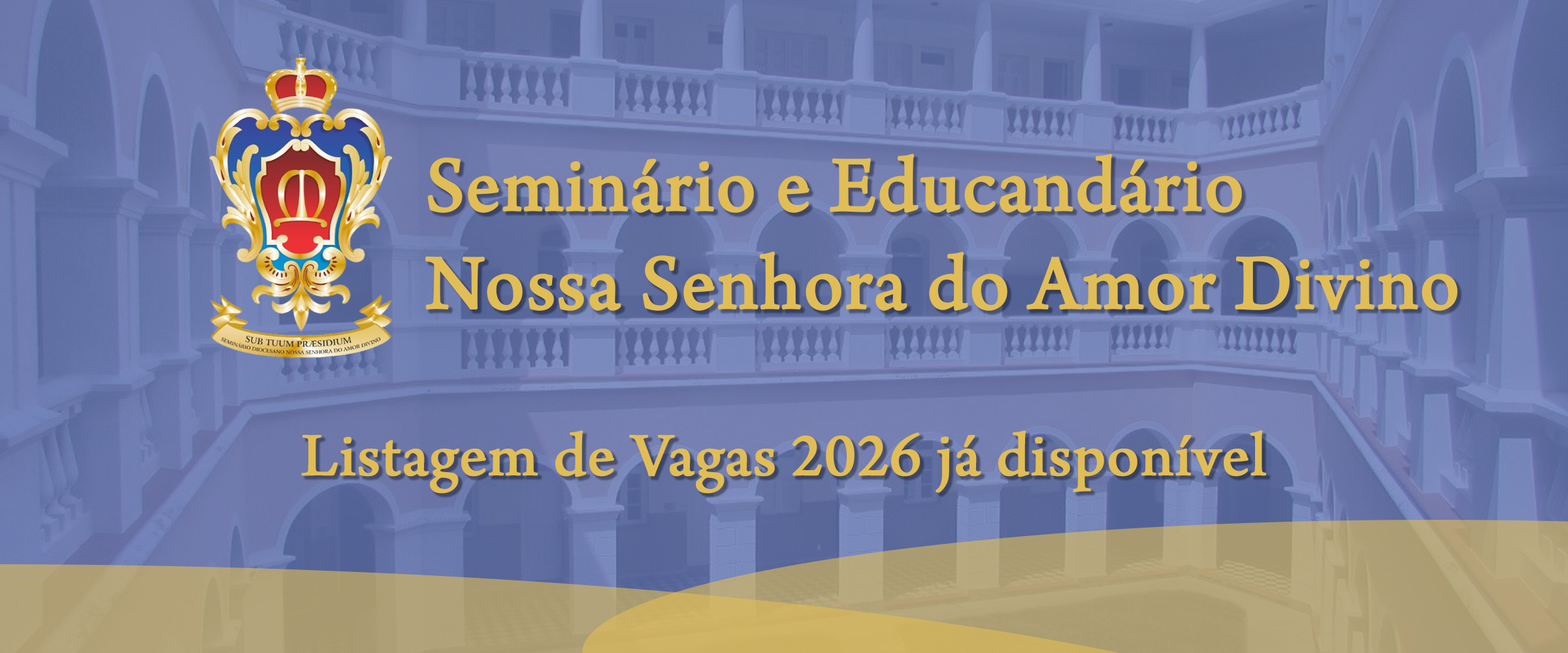
<style>
.page{position:relative;width:1568px;height:653px}
.page>*{position:absolute;margin:0}
.t1{font:81.7px "ArnoPro-Regular";color:#e1bd56;font-weight:bold}
.t2{font:65.3px "ArnoPro-Regular";color:#e1bd56;font-weight:bold}
</style>
<div class="page">
<p class="t1" style="left:425px;top:154px;width:1033px;height:157px">Seminário e Educandário<br>Nossa Senhora do Amor Divino</p>
<p class="t2" style="left:301px;top:431px;width:965px;height:63px">Listagem de Vagas 2026 já disponível</p>
</div>
